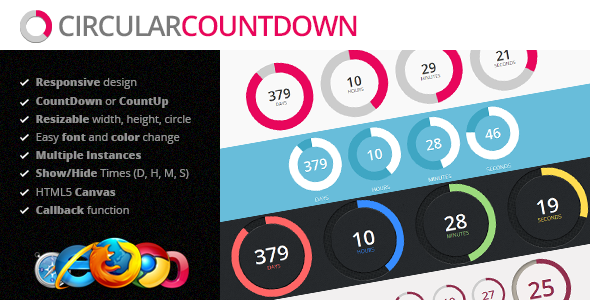
<style>
.page{position:relative;width:590px;height:300px}
.page>*{position:absolute;margin:0}
.t1{font:28.3px "OpenSans-Semibold";letter-spacing:-0.05em;color:#e8065c;text-transform:uppercase}
.t2{font:28.3px "OpenSans-Semibold";letter-spacing:-0.05em;color:#7a7a7a;text-transform:uppercase}
.t3{font:11px "OpenSans-Extrabold";color:#939393}
.t4{font:11px "OpenSans";color:#939393}
</style>
<div class="page">
<p class="t1" style="left:59px;top:15px;width:298px;height:22px"><span class="t2">CIRCULAR</span>COUNTDOWN</p>
<p class="t3" style="left:36px;top:78px;width:155px;height:136px">Responsive <span class="t4">design <br></span>CountDown <span class="t4">or</span> CountUp <br>Resizable <span class="t4">width, height, circle<br>Easy </span>font<span class="t4"> and </span>color<span class="t4"> change<br></span>Multiple Instances<br>Show/Hide<span class="t4"> Times (D, H, M, S)<br>HTML5 </span>Canvas<br>Callback <span class="t4">function</span></p>
</div>
